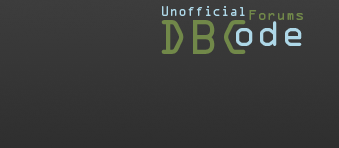
<style>
.page{position:relative;width:339px;height:148px}
.page>*{position:absolute;margin:0}
.t1{font:11.9px "OCRAStd";color:#aed8e8}
.t2{font:13px "OCRAStd";color:#718849}
.t3{font:43.3px "OCRAStd";color:#718849}
.t4{font:34px "OCRAStd";color:#aed8e8}
</style>
<div class="page">
<p class="t1" style="left:162px;top:6px;width:83px;height:10px">Unofficial</p>
<p class="t2" style="left:249px;top:10px;width:54px;height:10px">Forums</p>
<p class="t3" style="left:161px;top:20px;width:85px;height:34px">DBC</p>
<p class="t4" style="left:236px;top:21px;width:66px;height:25px">ode</p>
</div>
